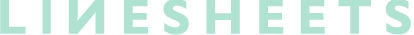
<style>
.page{position:relative;width:414px;height:35px;background:#ffffff}
.page>*{position:absolute;margin:0}
.t1{font:48px "Gibson-Bold";color:#b0e2d2}
</style>
<div class="page">
<p class="t1" style="left:0px;top:0px;width:411px;height:35px">L I     E S H E E T S</p>
<p class="t1" style="left:68px;top:0px;width:37px;height:34px;rotate:180deg">N</p>
</div>
